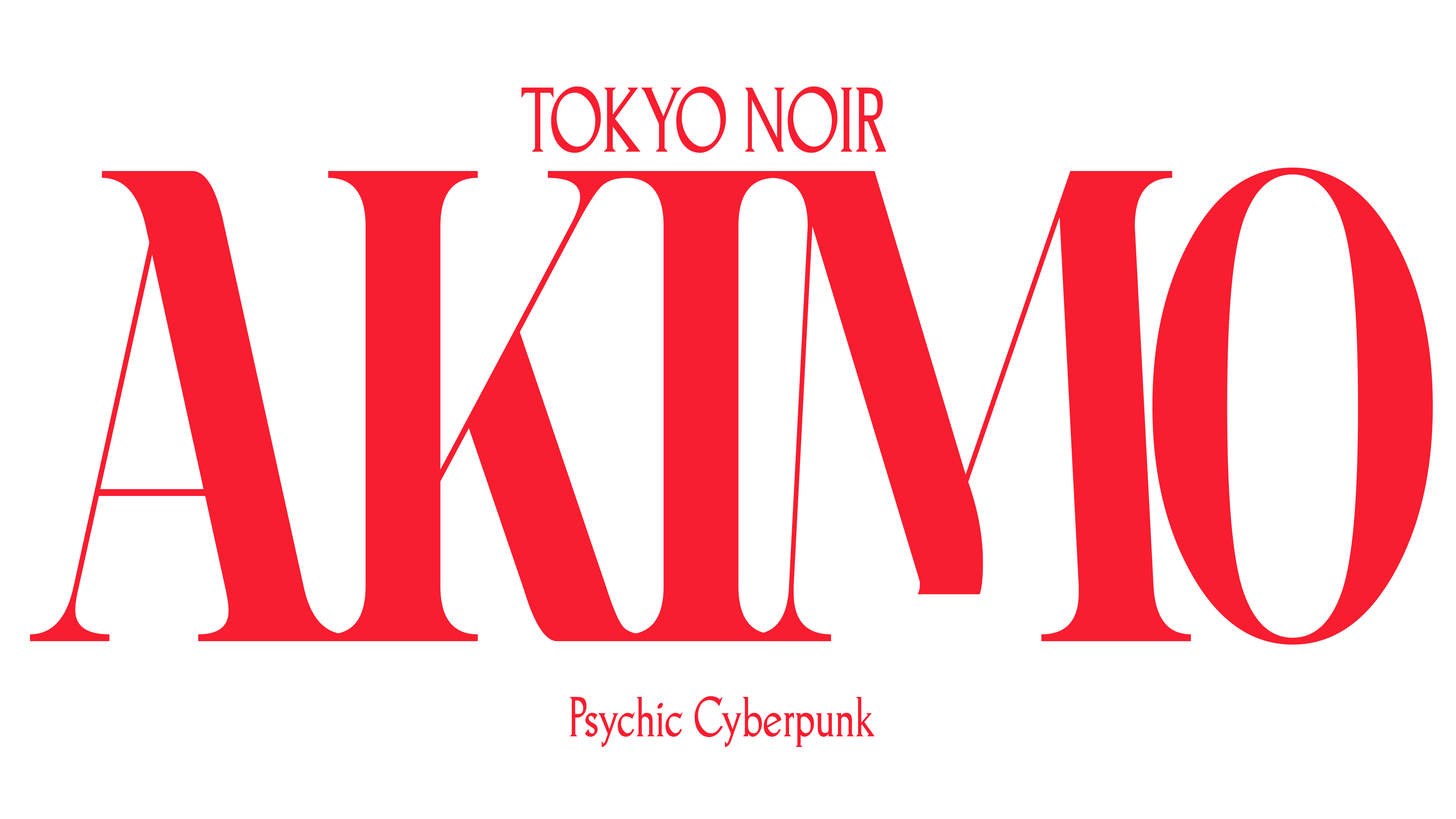
<style>
.page{position:relative;width:1456px;height:819px;background:#ffffff}
.page>*{position:absolute;margin:0}
.t1{font:84.9px "Goodfish-Regular";color:#f81d2f;scale:0.91 1}
.t2{font:708.1px "spinweradBold";letter-spacing:-0.08em;color:#f81d2f;scale:0.68 1}
.t3{font:52.2px "Goodfish-Regular";color:#f81d2f;scale:0.91 1}
</style>
<div class="page">
<p class="t1" style="left:521px;top:86px;width:365px;height:67px">TOKYO NOIR</p>
<p class="t2" style="left:30px;top:168px;width:1403px;height:477px">AKIMO</p>
<p class="t3" style="left:570px;top:696px;width:305px;height:51px">Psychic Cyberpunk</p>
</div>
